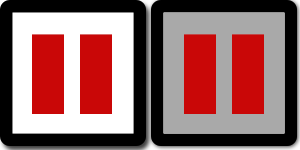
<style>
.page{position:relative;width:300px;height:150px;background:#000000}
.page>*{position:absolute;margin:0}
.t1{font:95.8px "8BITWONDERNominal";color:#c90707}
</style>
<div class="page">
<p class="t1" style="left:32px;top:34px;width:80px;height:80px">II</p>
<p class="t1" style="left:184px;top:34px;width:80px;height:80px">II</p>
</div>
